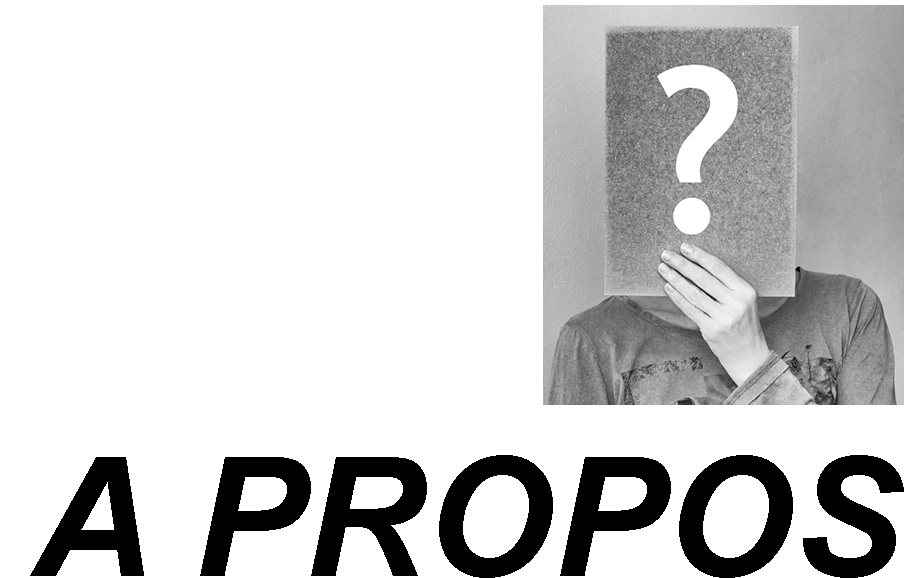
<style>
.page{position:relative;width:911px;height:578px;background:#ffffff}
.page>*{position:absolute;margin:0}
.t1{font:166.4px "Arial-BoldItalicMT";color:#000000}
</style>
<div class="page">
<p class="t1" style="left:30px;top:455px;width:874px;height:123px">A PROPOS</p>
</div>
